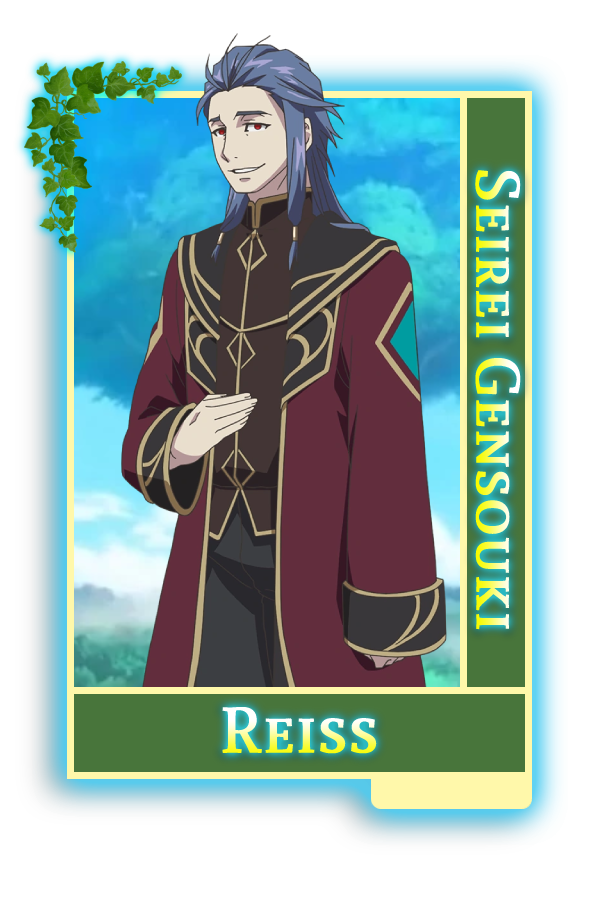
<style>
.page{position:relative;width:600px;height:900px}
.page>*{position:absolute;margin:0}
.t1{font:61px "AndadaSC-Regular";font-weight:bold}
.t2{font:64px "AndadaSC-Regular";font-weight:bold}
</style>
<div class="page">
<p class="t1" style="left:475px;top:170px;width:46px;height:460px;rotate:90deg">Seirei Gensouki</p>
<p class="t2" style="left:222px;top:706px;width:155px;height:48px">Reiss</p>
</div>
